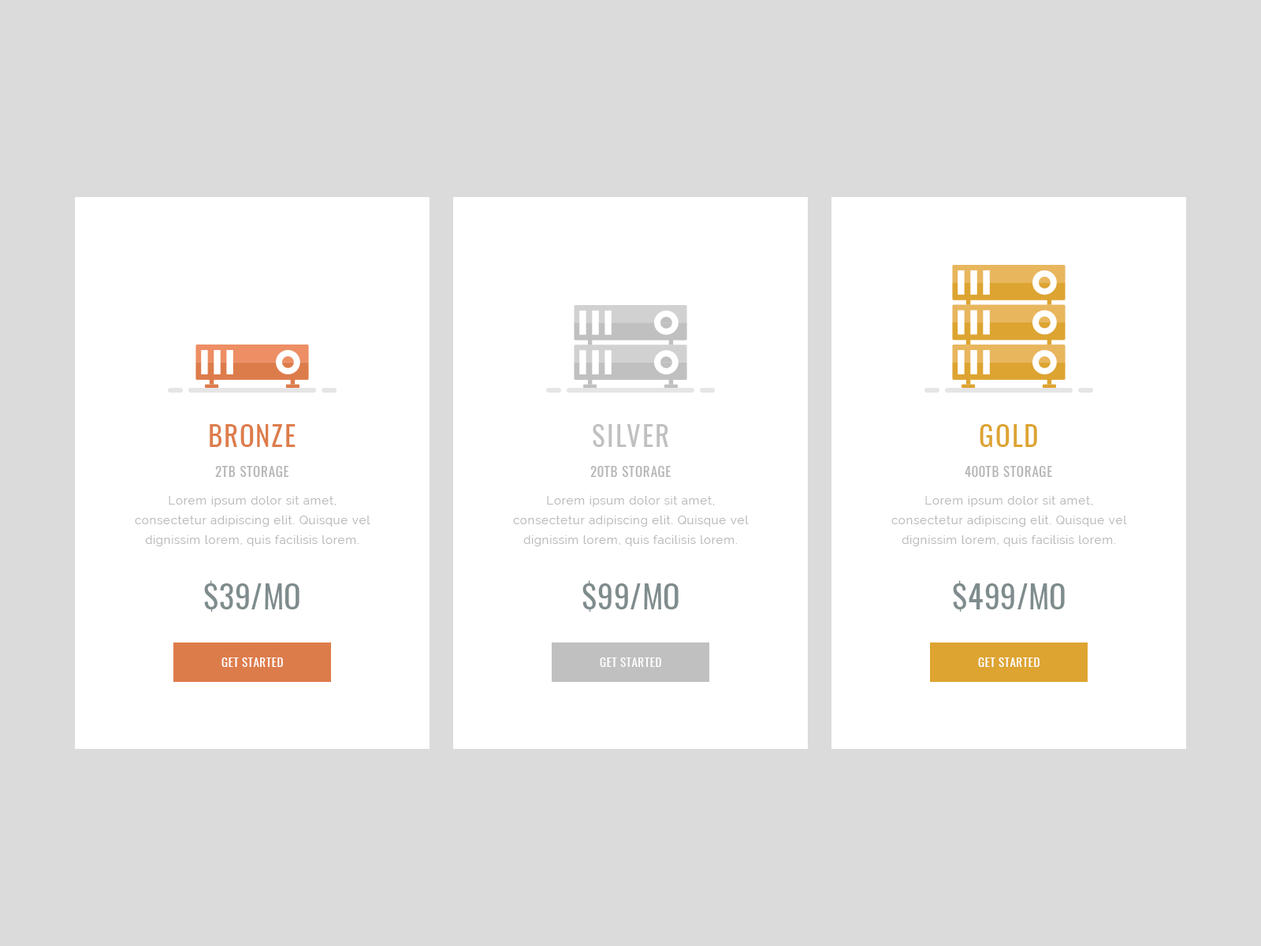
<style>
.page{position:relative;width:1261px;height:946px;background:#dbdbdb}
.page>*{position:absolute;margin:0}
.t1{font:27.6px "Oswald-Regular";letter-spacing:0.05em;color:#dd7c4b;text-transform:uppercase}
.t2{font:27.6px "Oswald-Regular";letter-spacing:0.05em;color:#c0c0c0;text-transform:uppercase}
.t3{font:27.6px "Oswald-Regular";letter-spacing:0.05em;color:#dda431;text-transform:uppercase}
.t4{font:13.4px "Oswald-Regular";letter-spacing:0.05em;color:#b4b4b4;text-transform:uppercase}
.t5{font:11.8px/19.7px "Raleway-Regular";letter-spacing:0.05em;color:#bababa}
.t6{font:31.5px "Oswald-Regular";letter-spacing:0.01em;color:#7f8c8d;text-transform:uppercase}
.t7{font:11.8px "Oswald-Regular";letter-spacing:0.05em;color:#ffffff;text-transform:uppercase}
</style>
<div class="page">
<p class="t1" style="left:210px;top:424px;width:86px;height:23px">Bronze</p>
<p class="t2" style="left:593px;top:424px;width:75px;height:23px">Silver</p>
<p class="t3" style="left:980px;top:424px;width:57px;height:23px">Gold</p>
<p class="t4" style="left:215px;top:466px;width:74px;height:11px">2TB Storage</p>
<p class="t4" style="left:590px;top:466px;width:81px;height:11px">20TB Storage</p>
<p class="t4" style="left:965px;top:466px;width:87px;height:11px">400TB Storage</p>
<p class="t5" style="left:135px;top:496px;width:235px;height:50px;text-align:center">Lorem ipsum dolor sit amet, consectetur adipiscing elit. Quisque vel dignissim lorem, quis facilisis lorem. Donec vitae efficitur tellus. Quisque et ultricies ex.</p>
<p class="t5" style="left:513px;top:496px;width:236px;height:50px;text-align:center">Lorem ipsum dolor sit amet, consectetur adipiscing elit. Quisque vel dignissim lorem, quis facilisis lorem. Donec vitae efficitur tellus. Quisque et ultricies ex.</p>
<p class="t5" style="left:891px;top:496px;width:236px;height:50px;text-align:center">Lorem ipsum dolor sit amet, consectetur adipiscing elit. Quisque vel dignissim lorem, quis facilisis lorem. Donec vitae efficitur tellus. Quisque et ultricies ex.</p>
<p class="t6" style="left:204px;top:580px;width:95px;height:32px">$39/mo</p>
<p class="t6" style="left:582px;top:580px;width:97px;height:32px">$99/mo</p>
<p class="t6" style="left:953px;top:580px;width:112px;height:32px">$499/mo</p>
<p class="t7" style="left:221px;top:657px;width:62px;height:10px">Get Started</p>
<p class="t7" style="left:600px;top:657px;width:61px;height:10px">Get Started</p>
<p class="t7" style="left:978px;top:657px;width:61px;height:10px">Get Started</p>
</div>
